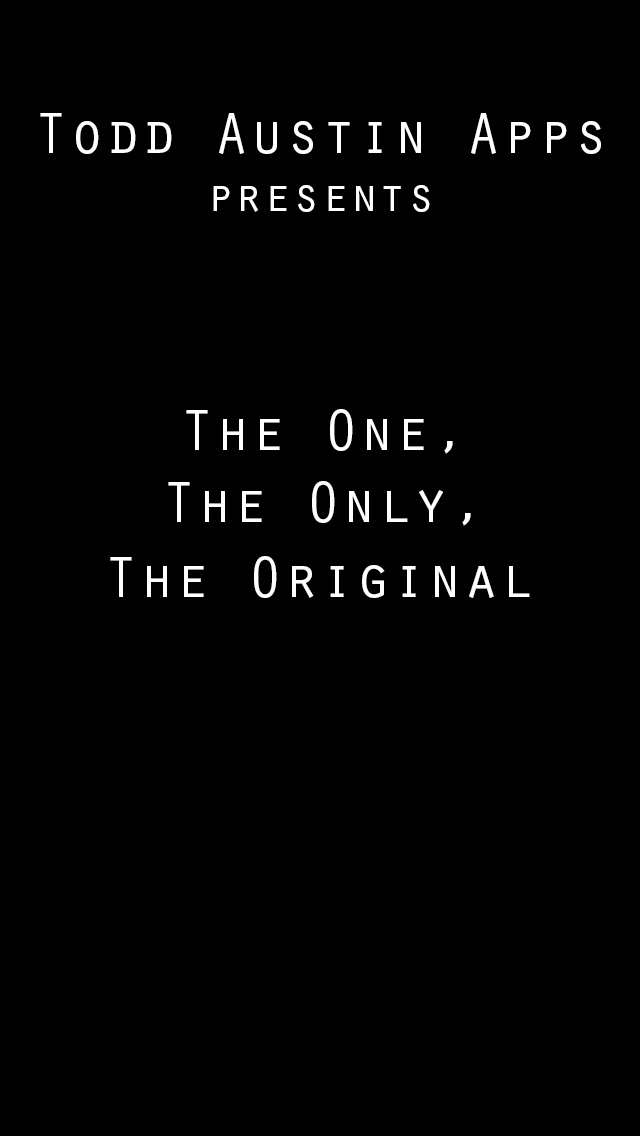
<style>
.page{position:relative;width:640px;height:1136px;background:#010101}
.page>*{position:absolute;margin:0}
.t1{font:60px "OratorStd";color:#fefefd}
.t2{font:48px "OratorStd";color:#fefefd}
</style>
<div class="page">
<p class="t1" style="left:40px;top:113px;width:561px;height:99px;text-align:center">Todd Austin Apps<br><span class="t2">presents</span></p>
<p class="t1" style="left:186px;top:409px;width:267px;height:45px">The One,</p>
<p class="t1" style="left:168px;top:481px;width:303px;height:45px">The Only,</p>
<p class="t1" style="left:110px;top:556px;width:420px;height:42px">The Original</p>
</div>
